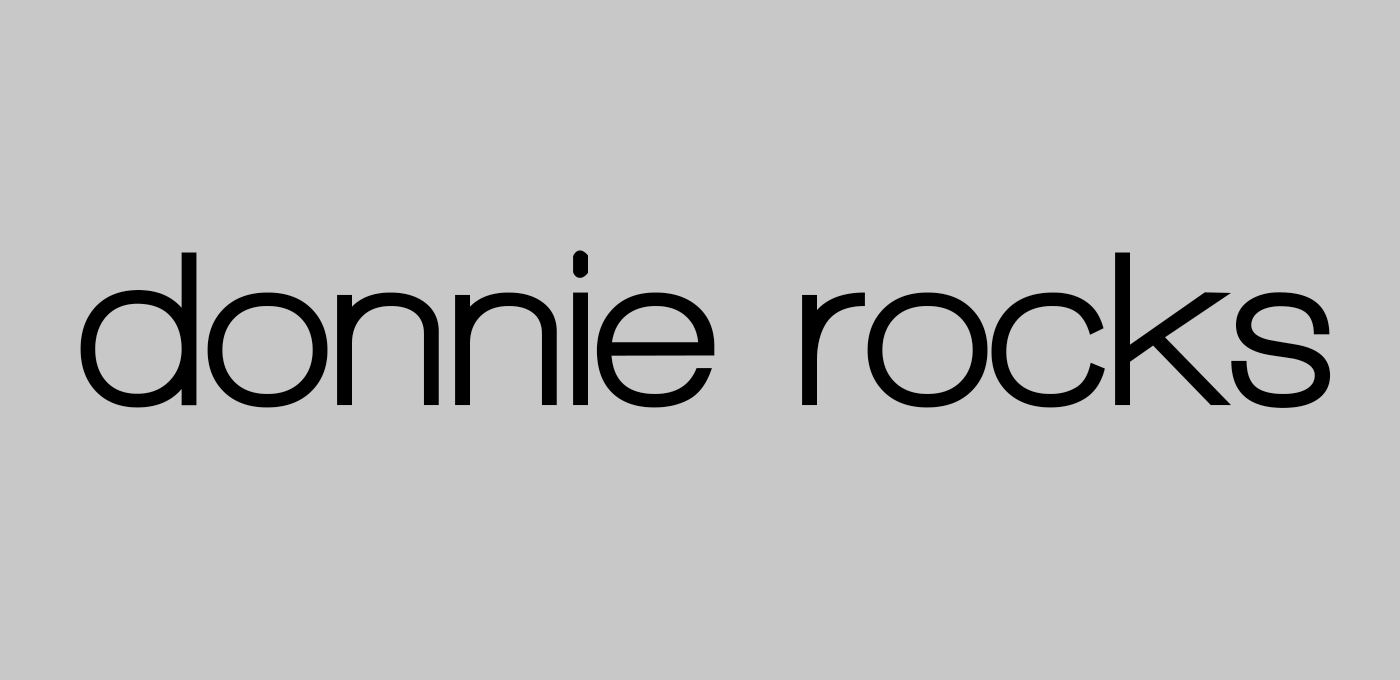
<style>
.page{position:relative;width:1400px;height:680px;background:#c9c8c8}
.page>*{position:absolute;margin:0}
.t1{font:225px "WalkwayUltraBold";color:#000000}
</style>
<div class="page">
<p class="t1" style="left:80px;top:250px;width:1251px;height:158px">donnie rocks</p>
</div>
